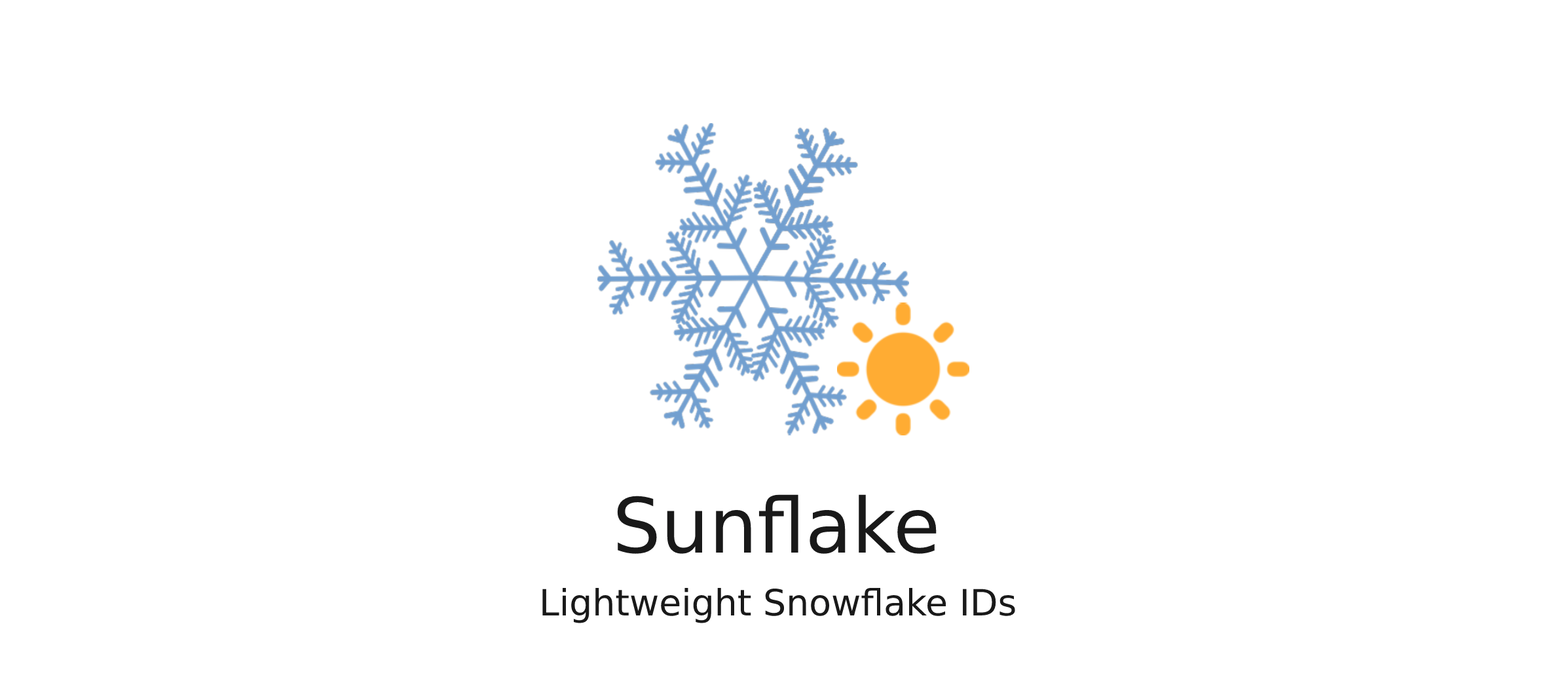
<style>
.page{position:relative;width:1568px;height:694px;background:#ffffff}
.page>*{position:absolute;margin:0}
.t1{font:76.1px "DejaVuSans";color:#191919}
.t2{font:36.2px "DejaVuSans";color:#191919}
</style>
<div class="page">
<p class="t1" style="left:617px;top:495px;width:320px;height:59px">Sunflake</p>
<p class="t2" style="left:542px;top:588px;width:473px;height:36px">Lightweight Snowflake IDs</p>
</div>
